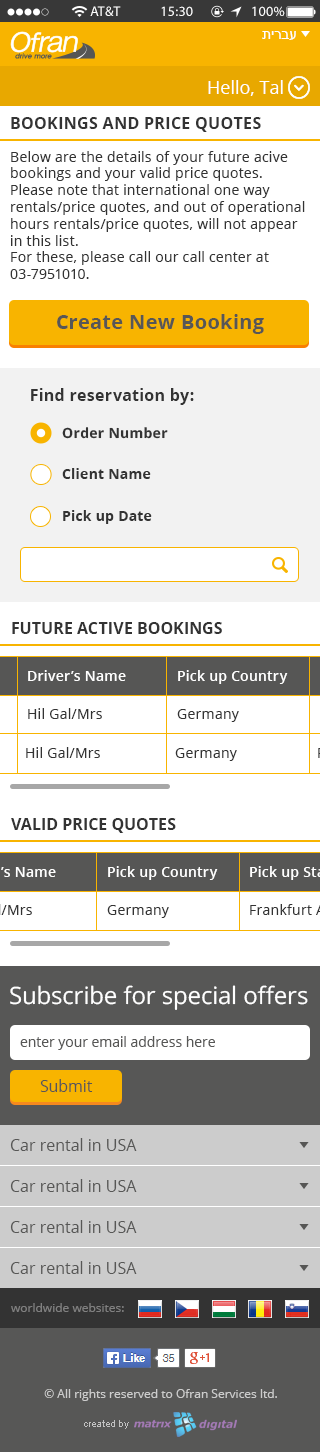
<style>
.page{position:relative;width:320px;height:1452px;background:#ffffff}
.page>*{position:absolute;margin:0}
.t1{font:14px "MyriadPro-Regular";letter-spacing:0.011em;color:#ffffff}
.t2{font:14px "MyriadPro-Regular";letter-spacing:0.02em;color:#ffffff}
.t3{font:14px "ArialMT";color:#ffffff;text-transform:uppercase}
.t4{font:18px "OpenSans";color:#ffffff}
.t5{font:16px "OpenSans-Bold";letter-spacing:0.02em;color:#333333;text-transform:uppercase}
.t6{font:14px "OpenSans";letter-spacing:0.02em;color:#333333}
.t7{font:20px "OpenSans-Bold";letter-spacing:0.02em;color:#575756}
.t8{font:16px "OpenSans-Bold";letter-spacing:0.02em;color:#333333}
.t9{font:14px "OpenSans-Bold";letter-spacing:0.02em;color:#333333}
.t10{font:16px "OpenSans-Bold";color:#333333;text-transform:uppercase}
.t11{font:14px "OpenSans-Semibold";letter-spacing:0.02em;color:#ffffff}
.t12{font:24px "OpenSans";color:#ffffff}
.t13{font:14px "OpenSans";color:#575756}
.t14{font:16px "OpenSans";color:#575756}
.t15{font:12px "OpenSans";color:#808080}
.t16{font:12px "OpenSans";color:#cccccc}
</style>
<div class="page">
<p class="t1" style="left:90px;top:6px;width:31px;height:10px">AT&amp;T</p>
<p class="t2" style="left:161px;top:6px;width:32px;height:10px">15:30</p>
<p class="t2" style="left:252px;top:6px;width:33px;height:10px">100%</p>
<p class="t3" style="left:262px;top:31px;width:34px;height:9px">עברית</p>
<p class="t4" style="left:208px;top:80px;width:75px;height:16px">Hello, Tal</p>
<p class="t5" style="left:11px;top:117px;width:250px;height:15px">bookings and price quotes</p>
<p class="t6" style="left:10px;top:151px;width:295px;height:128px">Below are the details of your future acive bookings and your valid price quotes.<br>Please note that international one way <br>rentals/price quotes, and out of operational hours rentals/price quotes, will not appear in this list. <br>For these, please call our call center at 03-7951010.</p>
<p class="t7" style="left:57px;top:314px;width:207px;height:20px">Create New Booking</p>
<p class="t8" style="left:31px;top:388px;width:163px;height:17px">Find reservation by:</p>
<p class="t9" style="left:62px;top:427px;width:106px;height:12px">Order Number</p>
<p class="t9" style="left:62px;top:468px;width:89px;height:11px">Client Name</p>
<p class="t9" style="left:63px;top:510px;width:89px;height:14px">Pick up Date</p>
<p class="t10" style="left:12px;top:622px;width:210px;height:12px">future active bookings</p>
<p class="t11" style="left:28px;top:670px;width:98px;height:11px">Driver’s Name</p>
<p class="t11" style="left:178px;top:670px;width:110px;height:14px">Pick up Country</p>
<p class="t6" style="left:28px;top:708px;width:74px;height:11px">Hil Gal/Mrs</p>
<p class="t6" style="left:177px;top:709px;width:62px;height:13px">Germany</p>
<p class="t6" style="left:26px;top:747px;width:74px;height:11px">Hil Gal/Mrs</p>
<p class="t6" style="left:175px;top:748px;width:62px;height:13px">Germany</p>
<p class="t10" style="left:11px;top:818px;width:165px;height:15px">valid price quotes</p>
<p class="t11" style="left:108px;top:866px;width:110px;height:14px">Pick up Country</p>
<p class="t6" style="left:107px;top:905px;width:62px;height:13px">Germany</p>
<p class="t12" style="left:10px;top:985px;width:298px;height:25px">Subscribe for special offers</p>
<p class="t13" style="left:20px;top:1036px;width:195px;height:14px">enter your email address here</p>
<p class="t14" style="left:40px;top:1079px;width:53px;height:13px">Submit</p>
<p class="t14" style="left:10px;top:1138px;width:127px;height:13px">Car rental in USA</p>
<p class="t14" style="left:10px;top:1179px;width:127px;height:13px">Car rental in USA</p>
<p class="t14" style="left:10px;top:1220px;width:127px;height:13px">Car rental in USA</p>
<p class="t14" style="left:10px;top:1261px;width:127px;height:13px">Car rental in USA</p>
<p class="t15" style="left:11px;top:1303px;width:113px;height:9px">worldwide websites:</p>
<p class="t16" style="left:44px;top:1389px;width:233px;height:12px">© All rights reserved to Ofran Services ltd.</p>
</div>
